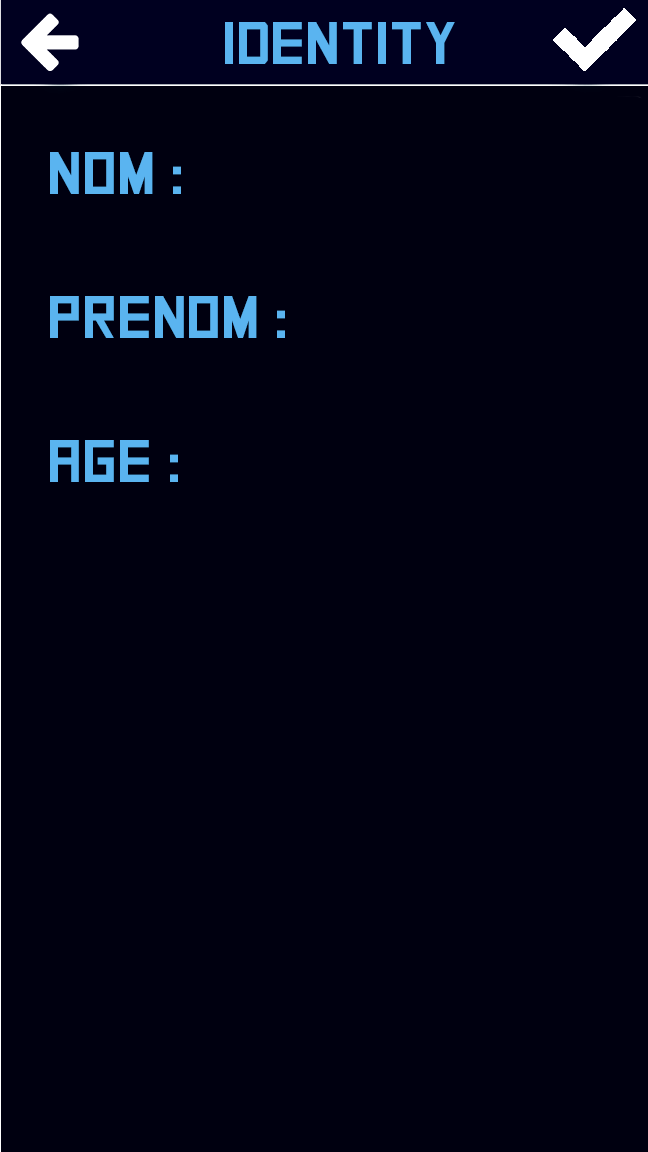
<style>
.page{position:relative;width:648px;height:1152px;background:#000010}
.page>*{position:absolute;margin:0}
.t1{font:60px "SquareFont";color:#5ab4f0}
</style>
<div class="page">
<p class="t1" style="left:225px;top:22px;width:230px;height:42px">IDENTITY</p>
<p class="t1" style="left:50px;top:152px;width:235px;height:330px">Nom : <br><br>Prenom : <br><br>Age :</p>
</div>
